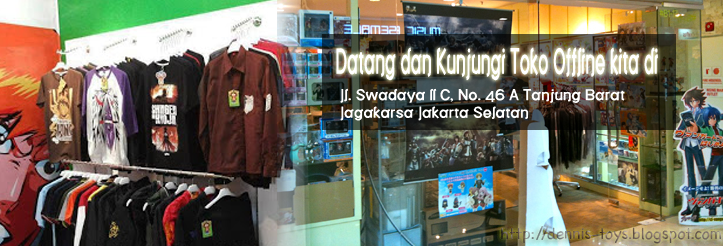
<style>
.page{position:relative;width:723px;height:246px}
.page>*{position:absolute;margin:0}
.t1{font:34.2px "Bedizen";color:#ffffff;scale:0.55 1}
.t2{font:14.7px "Bedizen";color:#ffffff;scale:1.12 1}
</style>
<div class="page">
<p class="t1" style="left:336px;top:47px;width:322px;height:34px">Datang dan Kunjungi Toko Offline kita di</p>
<p class="t2" style="left:340px;top:88px;width:285px;height:33px">Jl. Swadaya II C, No. 46 A Tanjung Barat <br>Jagakarsa Jakarta Selatan</p>
</div>
